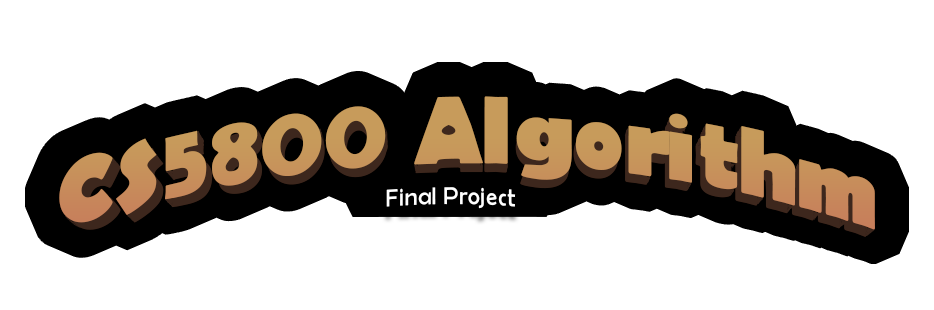
<style>
.page{position:relative;width:934px;height:310px;background:#ffffff}
.page>*{position:absolute;margin:0}
.t1{font:99.8px "BerlinSansFB-Bold";letter-spacing:0.005em;color:#c7965b;scale:0.95 1}
.t2{font:25.1px "BerlinSansFB-Reg";color:#ffffff}
</style>
<div class="page">
<p class="t1" style="left:59px;top:96px;width:816px;height:134px">CS5800 Algorithm</p>
<p class="t1" style="left:59px;top:96px;width:816px;height:134px">CS5800 Algorithm</p>
<p class="t2" style="left:386px;top:187px;width:130px;height:22px">Final Project</p>
</div>
